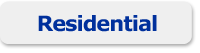
<style>
.page{position:relative;width:200px;height:53px;background:#efefef}
.page>*{position:absolute;margin:0}
.t1{font:21px "Verdana-Bold";letter-spacing:-0.05em;color:#00309c}
</style>
<div class="page">
<p class="t1" style="left:38px;top:15px;width:119px;height:17px">Residential</p>
</div>
